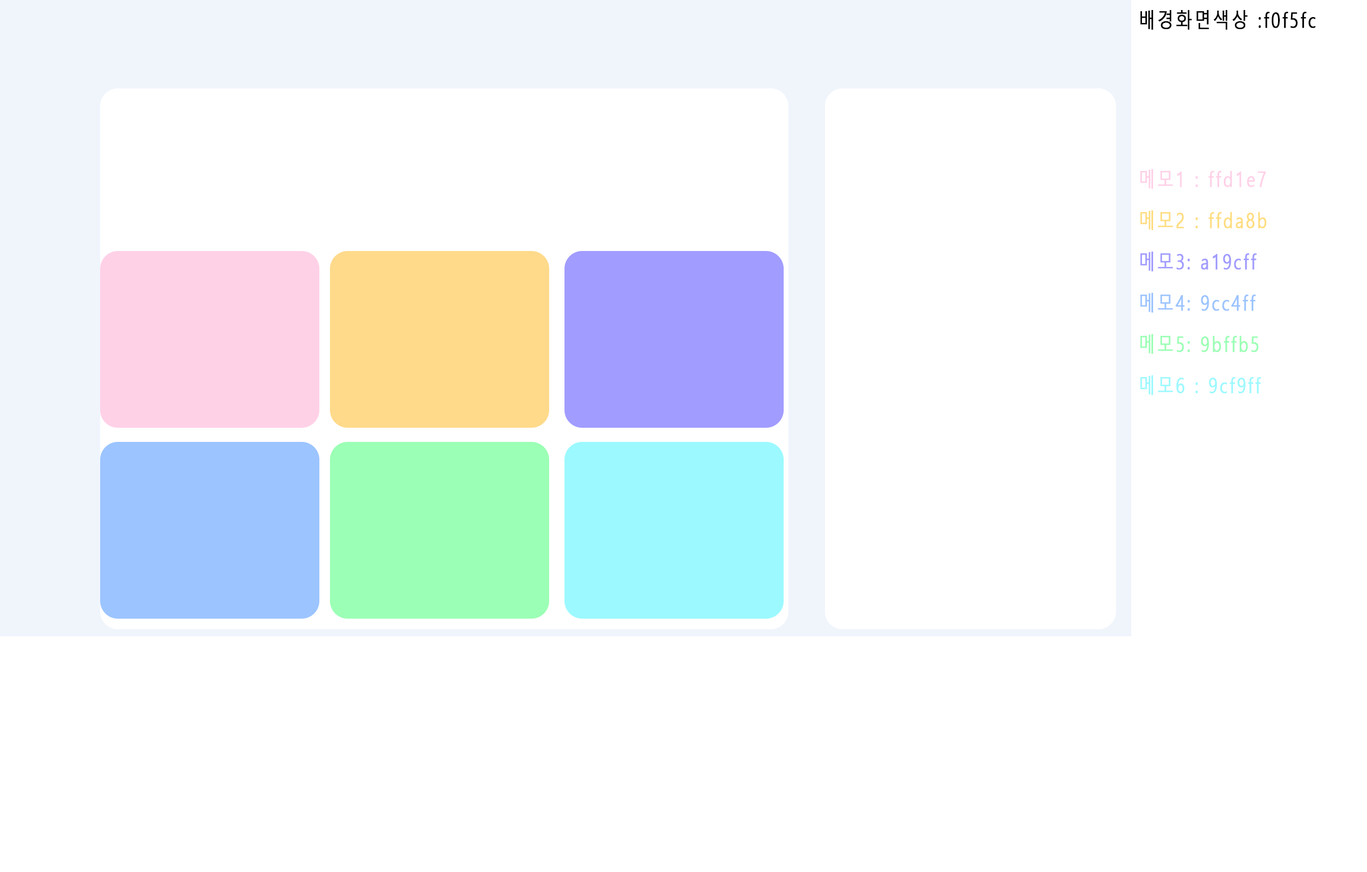
<style>
.page{position:relative;width:1367px;height:872px;background:#ffffff}
.page>*{position:absolute;margin:0}
.t1{font:20.6px "MalgunGothic";letter-spacing:0.1em;color:#000000;font-weight:bold;scale:0.8 1}
.t2{font:20.6px/20.6px "MalgunGothic";letter-spacing:0.1em;color:#ffd1e7;font-weight:bold;scale:0.8 1}
.t3{font:20.6px/20.6px "MalgunGothic";letter-spacing:0.1em;color:#ffdd81;font-weight:bold;scale:0.8 1}
.t4{font:20.6px/20.6px "MalgunGothic";letter-spacing:0.1em;color:#a19cff;font-weight:bold;scale:0.8 1}
.t5{font:20.6px/20.6px "MalgunGothic";letter-spacing:0.1em;color:#9cc4ff;font-weight:bold;scale:0.8 1}
.t6{font:20.6px/20.6px "MalgunGothic";letter-spacing:0.1em;color:#9bffb5;font-weight:bold;scale:0.8 1}
.t7{font:20.6px/20.6px "MalgunGothic";letter-spacing:0.1em;color:#9cf9ff;font-weight:bold;scale:0.8 1}
</style>
<div class="page">
<p class="t1" style="left:1140px;top:10px;width:176px;height:20px">배경화면색상 :f0f5fc</p>
<p class="t2" style="left:1140px;top:169px;width:127px;height:226px">메모1 : ffd1e7<br><span class="t3"><br>메모2 : ffda8b<br><br></span><span class="t4">메모3: a19cff<br><br></span><span class="t5">메모4: 9cc4ff<br><br></span><span class="t6">메모5: 9bffb5<br><br></span><span class="t7">메모6 : 9cf9ff</span></p>
</div>
